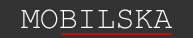
<style>
.page{position:relative;width:193px;height:38px;background:#333333}
.page>*{position:absolute;margin:0}
.t1{font:45px "SimplifiedArabicFixed";color:#ffffff;font-variant:small-caps}
</style>
<div class="page">
<p class="t1" style="left:21px;top:9px;width:151px;height:20px">mobilska</p>
</div>
